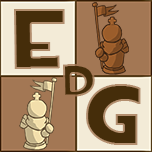
<style>
.page{position:relative;width:152px;height:152px;background:#a37754}
.page>*{position:absolute;margin:0}
.t1{font:85px "TF2Build";color:#452d0a;font-weight:bold}
.t2{font:45px "TF2Build";font-weight:bold}
</style>
<div class="page">
<p class="t1" style="left:14px;top:9px;width:51px;height:60px">E</p>
<p class="t2" style="left:63px;top:64px;width:32px;height:33px">d</p>
<p class="t1" style="left:86px;top:84px;width:55px;height:61px">G</p>
</div>
